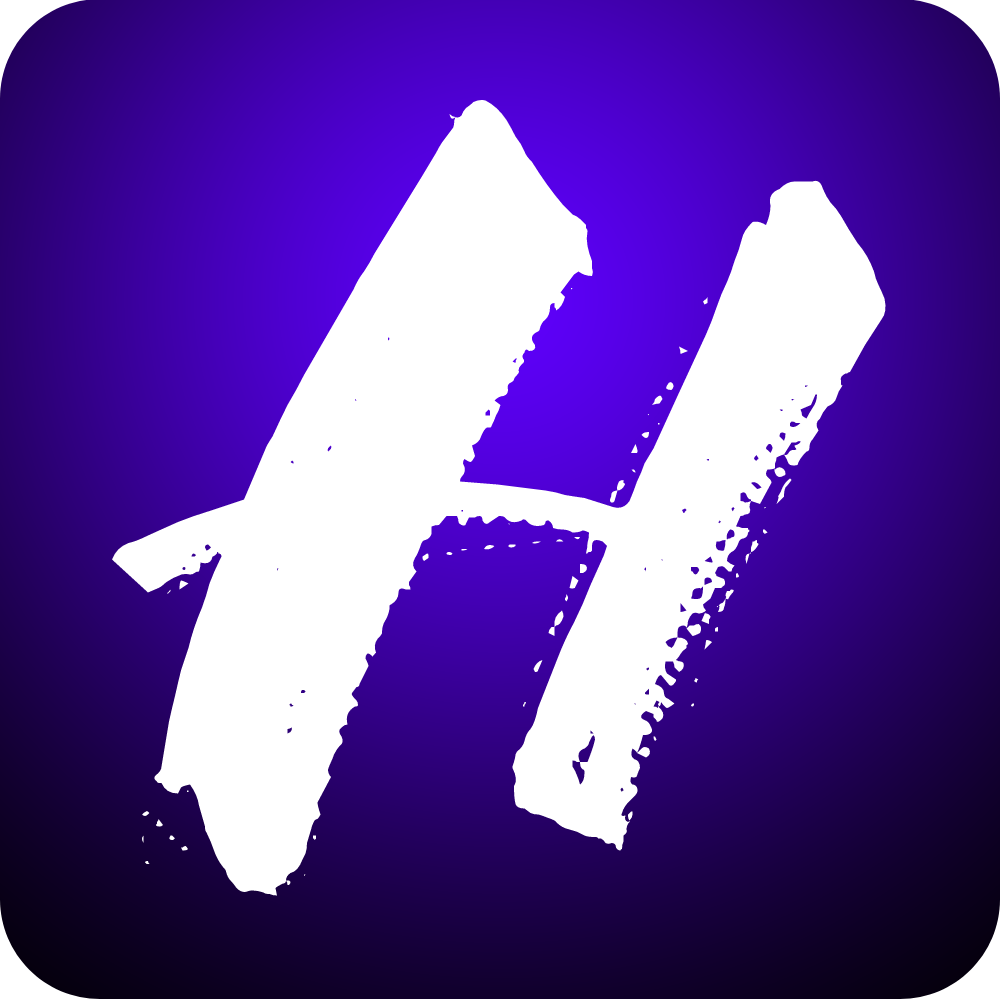
<style>
.page{position:relative;width:1000px;height:1000px;background:#ffffff}
.page>*{position:absolute;margin:0}
.t1{font:1500px "Calligraphy";color:#ffffff}
</style>
<div class="page">
<p class="t1" style="left:112px;top:99px;width:776px;height:797px">H</p>
</div>
